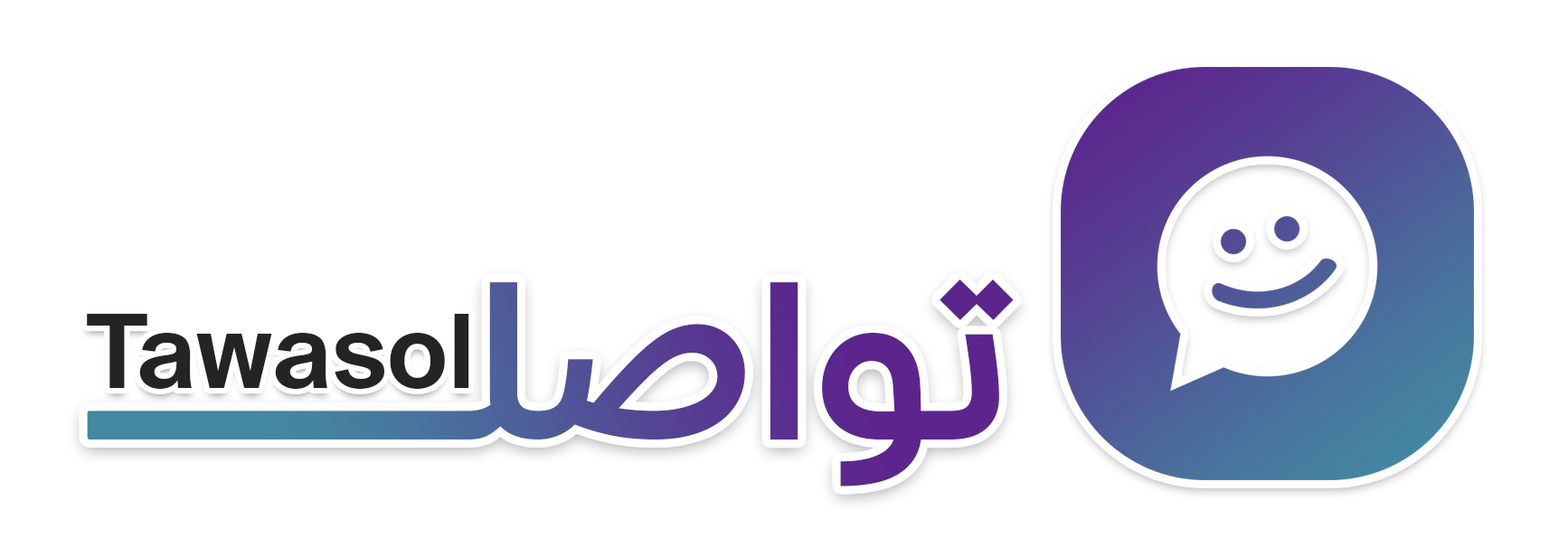
<style>
.page{position:relative;width:1568px;height:548px;background:#ffffff}
.page>*{position:absolute;margin:0}
.t1{font:216.8px "29LTKaff-SemiBold"}
.t2{font:102px "29LTKaff-SemiBold";color:#242424}
</style>
<div class="page">
<p class="t1" style="left:87px;top:279px;width:927px;height:207px">تواصلـــــــــ</p>
<p class="t2" style="left:87px;top:314px;width:382px;height:75px">Tawasol</p>
</div>
